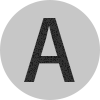
<style>
.page{position:relative;width:100px;height:100px;background:#c7c7c7}
.page>*{position:absolute;margin:0}
.t1{font:83.3px "AdobeFanHeitiStd-Bold";color:#323232}
</style>
<div class="page">
<p class="t1" style="left:24px;top:18px;width:51px;height:64px">A</p>
</div>
